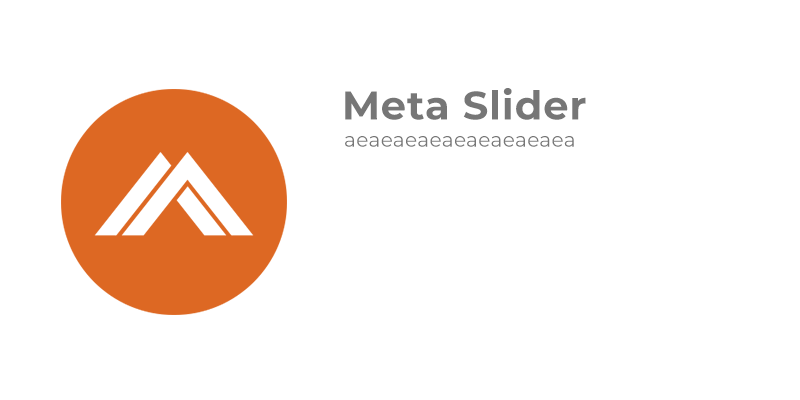
<style>
.page{position:relative;width:800px;height:400px;background:#ffffff}
.page>*{position:absolute;margin:0}
.t1{font:40px "Montserrat-Bold";letter-spacing:0.02em;color:#767676}
.t2{font:20px "Montserrat-Regular";letter-spacing:0.02em;color:#767676}
</style>
<div class="page">
<p class="t1" style="left:345px;top:88px;width:241px;height:32px">Meta Slider</p>
<p class="t2" style="left:345px;top:136px;width:229px;height:11px">aeaeaeaeaeaeaeaeaea</p>
</div>
